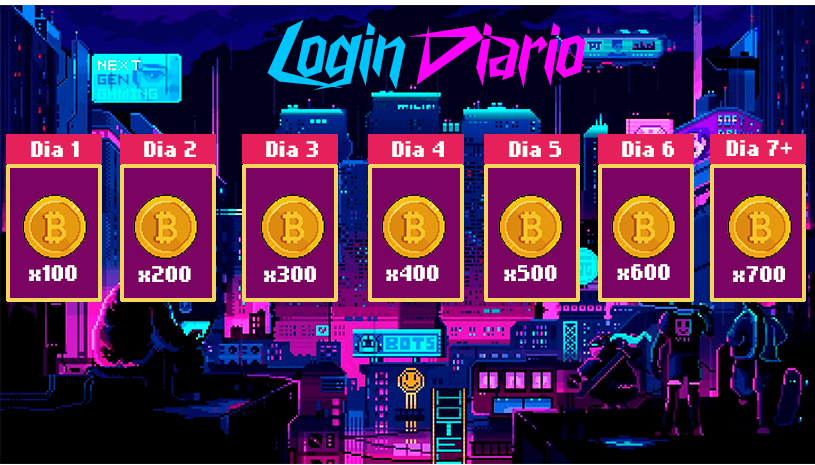
<style>
.page{position:relative;width:815px;height:465px}
.page>*{position:absolute;margin:0}
.t1{font:18px "NokiaCellphoneFC-Small";color:#fffffb}
</style>
<div class="page">
<p class="t1" style="left:31px;top:141px;width:48px;height:16px">Dia 1</p>
<p class="t1" style="left:144px;top:141px;width:52px;height:16px">Dia 2</p>
<p class="t1" style="left:266px;top:141px;width:52px;height:16px">Dia 3</p>
<p class="t1" style="left:392px;top:141px;width:52px;height:16px">Dia 4</p>
<p class="t1" style="left:509px;top:141px;width:52px;height:16px">Dia 5</p>
<p class="t1" style="left:622px;top:141px;width:52px;height:16px">Dia 6</p>
<p class="t1" style="left:726px;top:140px;width:66px;height:16px">Dia 7+</p>
<p class="t1" style="left:29px;top:265px;width:48px;height:16px">x100</p>
<p class="t1" style="left:138px;top:266px;width:53px;height:16px">x200</p>
<p class="t1" style="left:264px;top:266px;width:52px;height:16px">x300</p>
<p class="t1" style="left:386px;top:265px;width:53px;height:16px">x400</p>
<p class="t1" style="left:504px;top:265px;width:53px;height:16px">x500</p>
<p class="t1" style="left:617px;top:264px;width:53px;height:16px">x600</p>
<p class="t1" style="left:733px;top:266px;width:52px;height:16px">x700</p>
</div>
